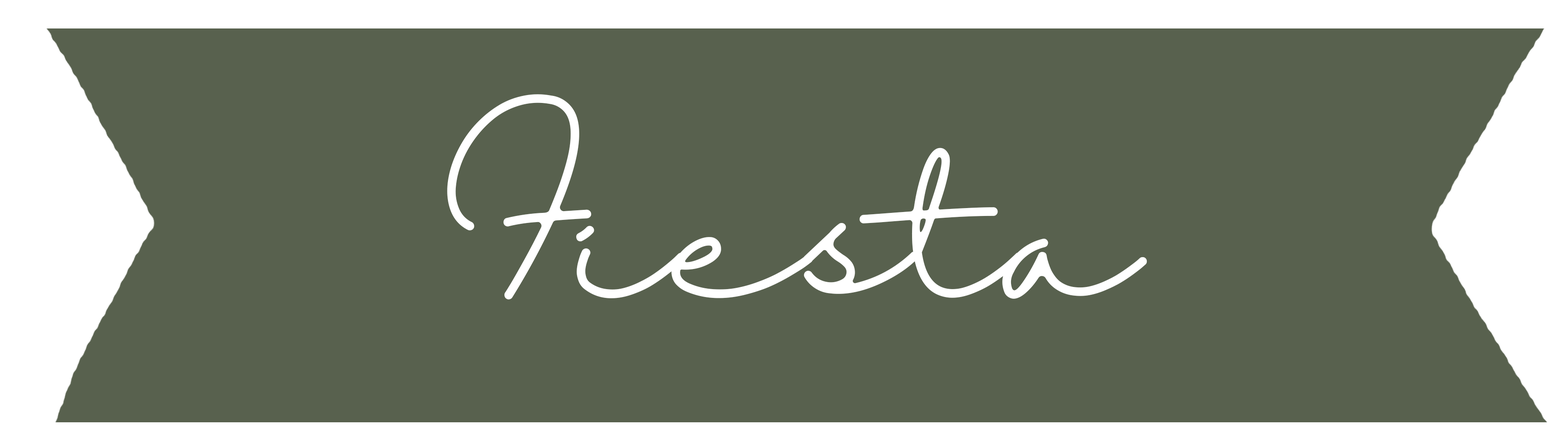
<style>
.page{position:relative;width:1568px;height:442px;background:#58614e}
.page>*{position:absolute;margin:0}
.t1{font:162.2px "HalimunRegular";color:#ffffff}
</style>
<div class="page">
<p class="t1" style="left:447px;top:94px;width:700px;height:206px">Fiesta</p>
</div>
